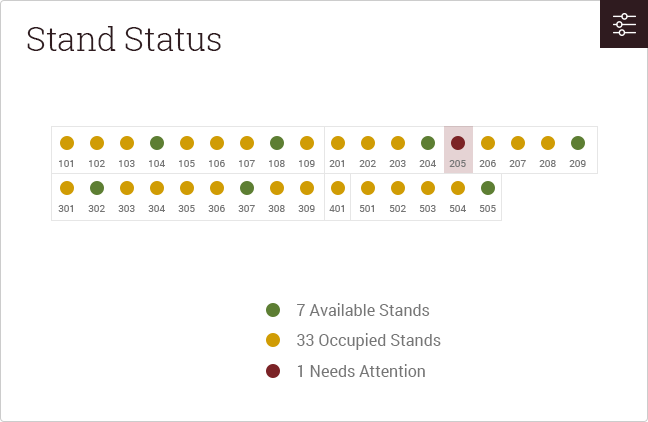
<style>
.page{position:relative;width:648px;height:422px;background:#ffffff}
.page>*{position:absolute;margin:0}
.t1{font:33px "RobotoSlab-Light";color:#2f1b1f}
.t2{font:10px "Roboto-Regular";color:#767676}
.t3{font:16px "Roboto-Regular";color:#767676}
</style>
<div class="page">
<p class="t1" style="left:27px;top:26px;width:194px;height:25px">Stand Status</p>
<p class="t2" style="left:59px;top:160px;width:14px;height:7px">101</p>
<p class="t2" style="left:89px;top:160px;width:16px;height:7px">102</p>
<p class="t2" style="left:119px;top:160px;width:16px;height:7px">103</p>
<p class="t2" style="left:149px;top:160px;width:16px;height:7px">104</p>
<p class="t2" style="left:179px;top:160px;width:16px;height:7px">105</p>
<p class="t2" style="left:209px;top:160px;width:16px;height:7px">106</p>
<p class="t2" style="left:239px;top:160px;width:16px;height:7px">107</p>
<p class="t2" style="left:269px;top:160px;width:16px;height:7px">108</p>
<p class="t2" style="left:299px;top:160px;width:16px;height:7px">109</p>
<p class="t2" style="left:329px;top:160px;width:15px;height:7px">201</p>
<p class="t2" style="left:359px;top:160px;width:17px;height:7px">202</p>
<p class="t2" style="left:389px;top:160px;width:17px;height:7px">203</p>
<p class="t2" style="left:419px;top:160px;width:17px;height:7px">204</p>
<p class="t2" style="left:449px;top:160px;width:17px;height:7px">205</p>
<p class="t2" style="left:479px;top:160px;width:17px;height:7px">206</p>
<p class="t2" style="left:509px;top:160px;width:17px;height:7px">207</p>
<p class="t2" style="left:539px;top:160px;width:17px;height:7px">208</p>
<p class="t2" style="left:569px;top:160px;width:17px;height:7px">209</p>
<p class="t2" style="left:58px;top:205px;width:15px;height:7px">301</p>
<p class="t2" style="left:88px;top:205px;width:17px;height:7px">302</p>
<p class="t2" style="left:118px;top:205px;width:17px;height:7px">303</p>
<p class="t2" style="left:148px;top:205px;width:17px;height:7px">304</p>
<p class="t2" style="left:178px;top:205px;width:17px;height:7px">305</p>
<p class="t2" style="left:208px;top:205px;width:17px;height:7px">306</p>
<p class="t2" style="left:238px;top:205px;width:17px;height:7px">307</p>
<p class="t2" style="left:268px;top:205px;width:17px;height:7px">308</p>
<p class="t2" style="left:298px;top:205px;width:17px;height:7px">309</p>
<p class="t2" style="left:329px;top:205px;width:15px;height:7px">401</p>
<p class="t2" style="left:359px;top:205px;width:15px;height:7px">501</p>
<p class="t2" style="left:389px;top:205px;width:17px;height:7px">502</p>
<p class="t2" style="left:419px;top:205px;width:17px;height:7px">503</p>
<p class="t2" style="left:449px;top:205px;width:17px;height:7px">504</p>
<p class="t2" style="left:479px;top:205px;width:17px;height:7px">505</p>
<p class="t3" style="left:297px;top:303px;width:133px;height:13px">7 Available Stands</p>
<p class="t3" style="left:297px;top:333px;width:144px;height:17px">33 Occupied Stands</p>
<p class="t3" style="left:297px;top:364px;width:128px;height:13px">1 Needs Attention</p>
</div>
